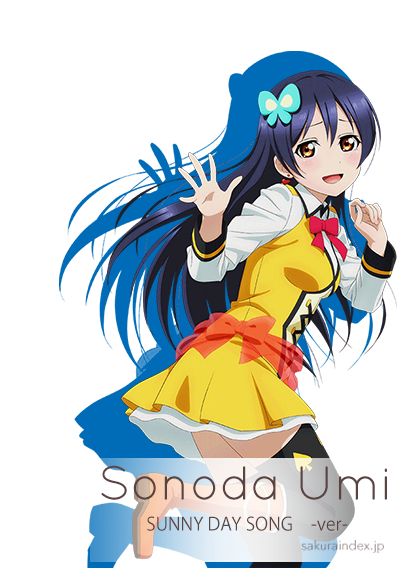
<style>
.page{position:relative;width:405px;height:568px;background:#ffffff}
.page>*{position:absolute;margin:0}
.t1{font:48px "QuicksandBook-Regular";color:#594443}
.t2{font:18px "KozGoPr6N-Regular";color:#594443}
.t3{font:12.8px "AvenirNextLTPro-Regular";color:#6e717b}
</style>
<div class="page">
<p class="t1" style="left:101px;top:465px;width:286px;height:35px">Sonoda Umi</p>
<p class="t2" style="left:147px;top:516px;width:201px;height:15px">SUNNY DAY SONG　-ver-</p>
<p class="t3" style="left:301px;top:540px;width:83px;height:13px">sakuraindex.jp</p>
</div>
